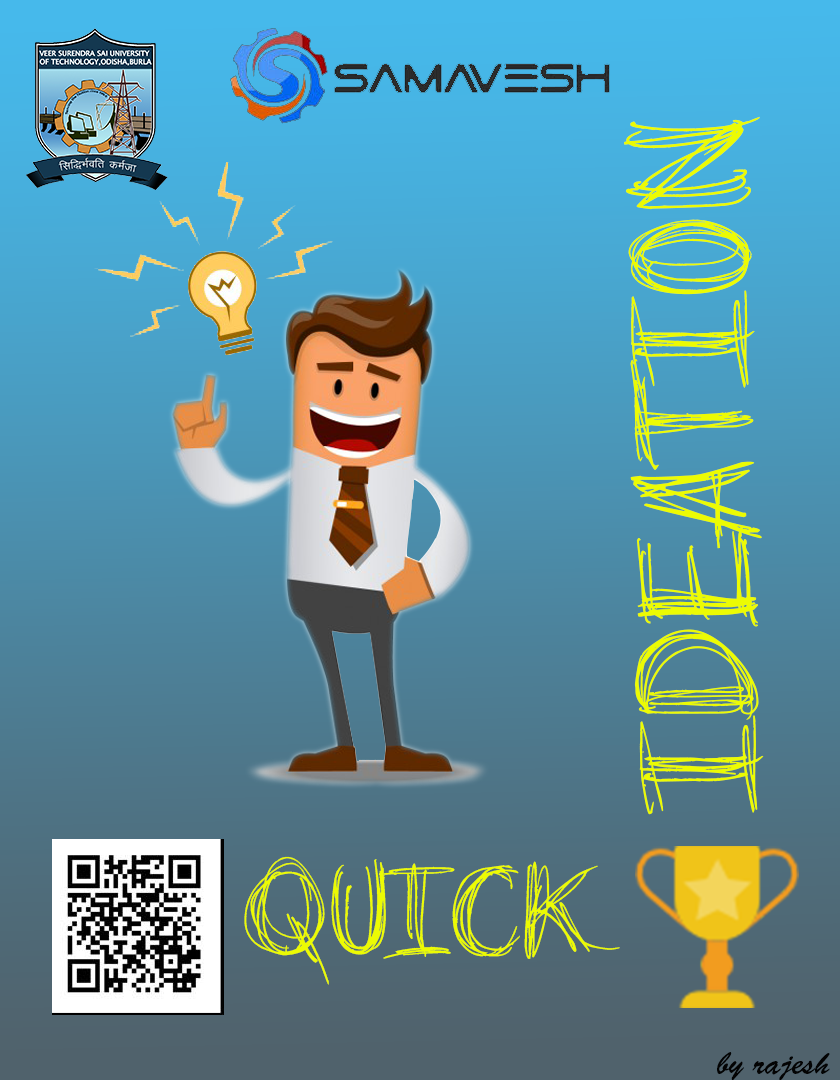
<style>
.page{position:relative;width:840px;height:1080px}
.page>*{position:absolute;margin:0}
.t1{font:124px "goaroundthebooks";color:#ecfb03}
.t2{font:95.2px "goaroundthebooks";color:#ecfb03}
.t3{font:31.9px "BrushScriptStd";color:#030303}
</style>
<div class="page">
<p class="t1" style="left:624px;top:116px;width:140px;height:699px;rotate:-91deg">IDEATION</p>
<p class="t2" style="left:244px;top:856px;width:376px;height:129px">Quick</p>
<p class="t3" style="left:717px;top:1052px;width:113px;height:29px">by rajesh</p>
</div>
